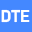
<style>
.page{position:relative;width:32px;height:32px;background:#4488ff}
.page>*{position:absolute;margin:0}
.t1{font:16.7px "Bahnschrift-Bold";color:#ffffff}
</style>
<div class="page">
<p class="t1" style="left:1px;top:9px;width:29px;height:14px">DTE</p>
</div>
